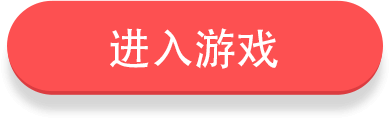
<style>
.page{position:relative;width:390px;height:119px;background:#fd5051}
.page>*{position:absolute;margin:0}
.t1{font:43px "AdobeHeitiStd-Regular";color:#ffffff}
</style>
<div class="page">
<p class="t1" style="left:110px;top:28px;width:168px;height:41px">进入游戏</p>
</div>
